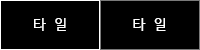
<style>
.page{position:relative;width:200px;height:50px;background:#000000}
.page>*{position:absolute;margin:0}
.t1{font:14px "NanumBarunGothic";letter-spacing:0.2em;color:#ffffff}
</style>
<div class="page">
<p class="t1" style="left:34px;top:18px;width:32px;height:13px">타 일</p>
<p class="t1" style="left:133px;top:18px;width:33px;height:13px">타 일</p>
</div>
